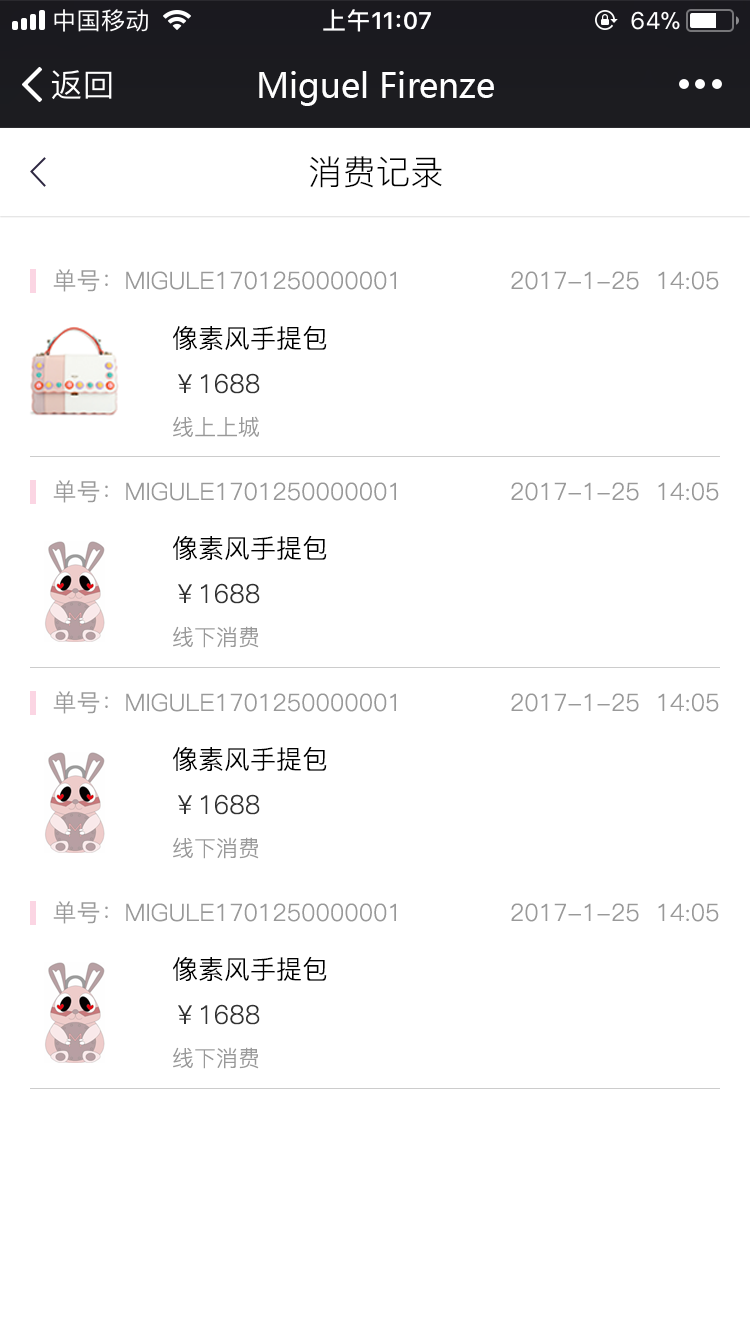
<style>
.page{position:relative;width:750px;height:1334px;background:#ffffff}
.page>*{position:absolute;margin:0}
.t1{font:34px "MicrosoftYaHei";color:#ffffff}
.t2{font:34px "PingFang-SC-Regular";color:#000000}
.t3{font:24px "PingFang-SC-Regular";color:#999999}
.t4{font:26px "PingFang-SC-Regular";color:#000000}
.t5{font:26px "PingFang-SC-Regular";color:#333333}
.t6{font:22px "PingFang-SC-Regular";color:#999999}
</style>
<div class="page">
<p class="t1" style="left:259px;top:71px;width:235px;height:35px">Miguel Firenze</p>
<p class="t2" style="left:309px;top:156px;width:133px;height:32px">消费记录</p>
<p class="t3" style="left:53px;top:269px;width:343px;height:23px">单号：MIGULE1701250000001</p>
<p class="t3" style="left:511px;top:271px;width:208px;height:19px">2017-1-25  14:05</p>
<p class="t4" style="left:173px;top:325px;width:154px;height:112px">像素风手提包<br><span class="t5">￥1688<br></span><span class="t6">线上上城</span></p>
<p class="t3" style="left:53px;top:480px;width:343px;height:23px">单号：MIGULE1701250000001</p>
<p class="t3" style="left:511px;top:482px;width:208px;height:19px">2017-1-25  14:05</p>
<p class="t4" style="left:173px;top:535px;width:154px;height:113px">像素风手提包<br><span class="t5">￥1688<br></span><span class="t6">线下消费</span></p>
<p class="t3" style="left:53px;top:691px;width:343px;height:23px">单号：MIGULE1701250000001</p>
<p class="t3" style="left:511px;top:693px;width:208px;height:19px">2017-1-25  14:05</p>
<p class="t4" style="left:173px;top:746px;width:154px;height:113px">像素风手提包<br><span class="t5">￥1688<br></span><span class="t6">线下消费</span></p>
<p class="t3" style="left:53px;top:901px;width:343px;height:23px">单号：MIGULE1701250000001</p>
<p class="t3" style="left:511px;top:903px;width:208px;height:19px">2017-1-25  14:05</p>
<p class="t4" style="left:173px;top:956px;width:154px;height:113px">像素风手提包<br><span class="t5">￥1688<br></span><span class="t6">线下消费</span></p>
</div>
